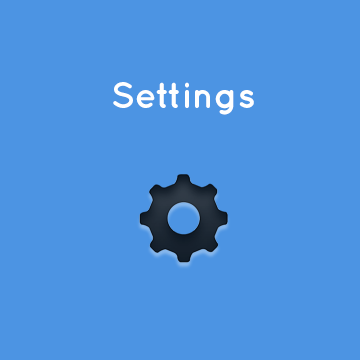
<style>
.page{position:relative;width:360px;height:360px;background:#4c94e3}
.page>*{position:absolute;margin:0}
.t1{font:36px "QuicksandBold-Regular";color:#ffffff}
</style>
<div class="page">
<p class="t1" style="left:113px;top:82px;width:141px;height:33px">Settings</p>
</div>
